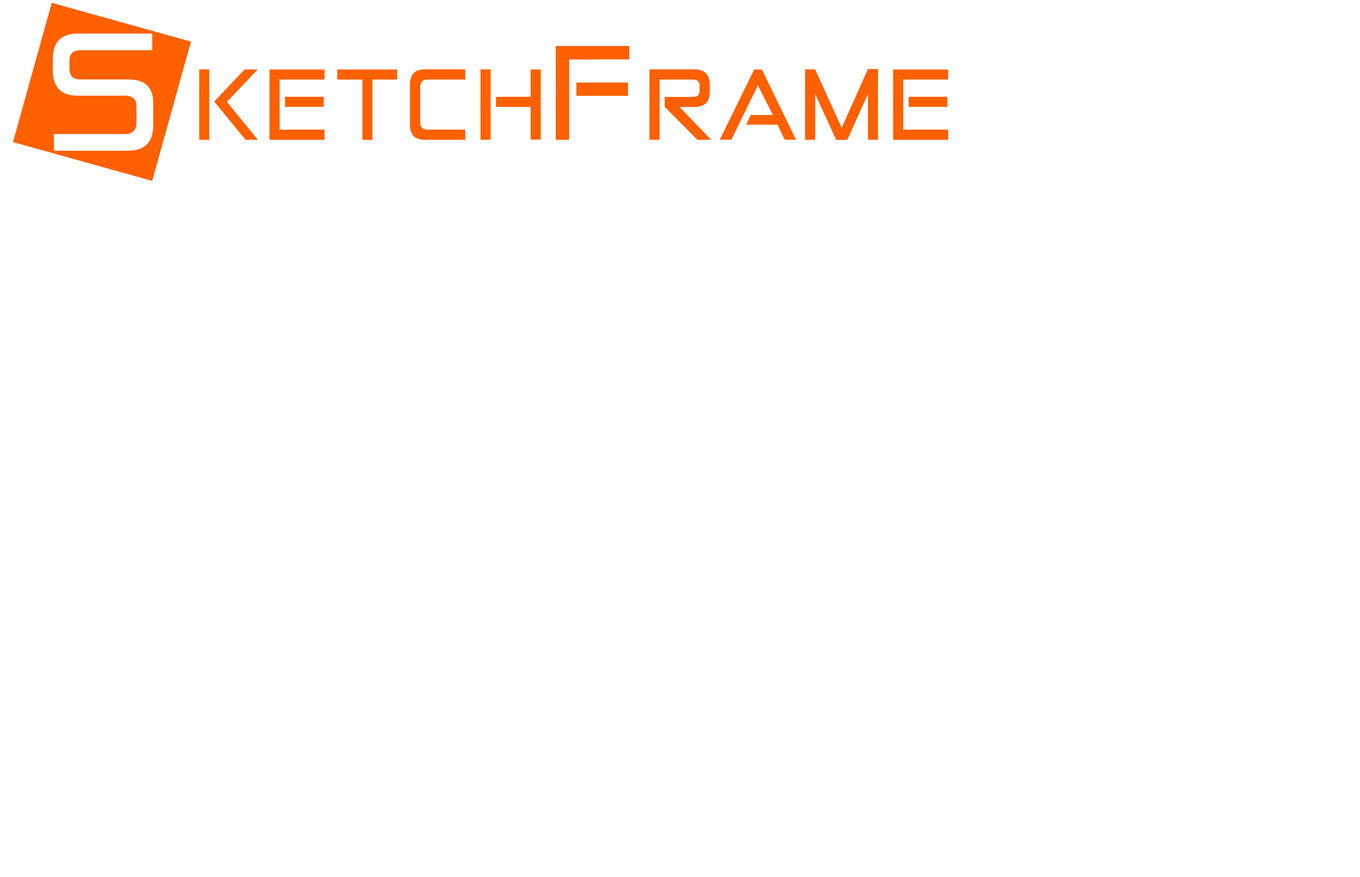
<style>
.page{position:relative;width:1360px;height:877px;background:#ffffff}
.page>*{position:absolute;margin:0}
.t1{font:97.9px "Anita--Semi-square";color:#ff6000}
.t2{font:130.6px "Anita--Semi-square";color:#ff6000}
</style>
<div class="page">
<p class="t1" style="left:199px;top:46px;width:749px;height:94px">KETCH<span class="t2">F</span>RAME</p>
</div>
